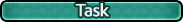
<style>
.page{position:relative;width:183px;height:22px}
.page>*{position:absolute;margin:0}
.t1{font:18px "AdobeClean-Regular";letter-spacing:-0.04em;color:#edeff1;font-weight:bold}
</style>
<div class="page">
<p class="t1" style="left:75px;top:3px;width:34px;height:14px">Task</p>
</div>
